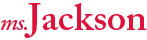
<style>
.page{position:relative;width:147px;height:40px;background:#ffffff}
.page>*{position:absolute;margin:0}
.t1{font:37.6px "ACaslonPro-Semibold";color:#dc143c}
.t2{font:24px "ACaslonPro-SemiboldItalic";letter-spacing:-0.05em;color:#dc143c}
</style>
<div class="page">
<p class="t1" style="left:1px;top:3px;width:146px;height:35px"><span class="t2">ms.</span>Jackson</p>
</div>
